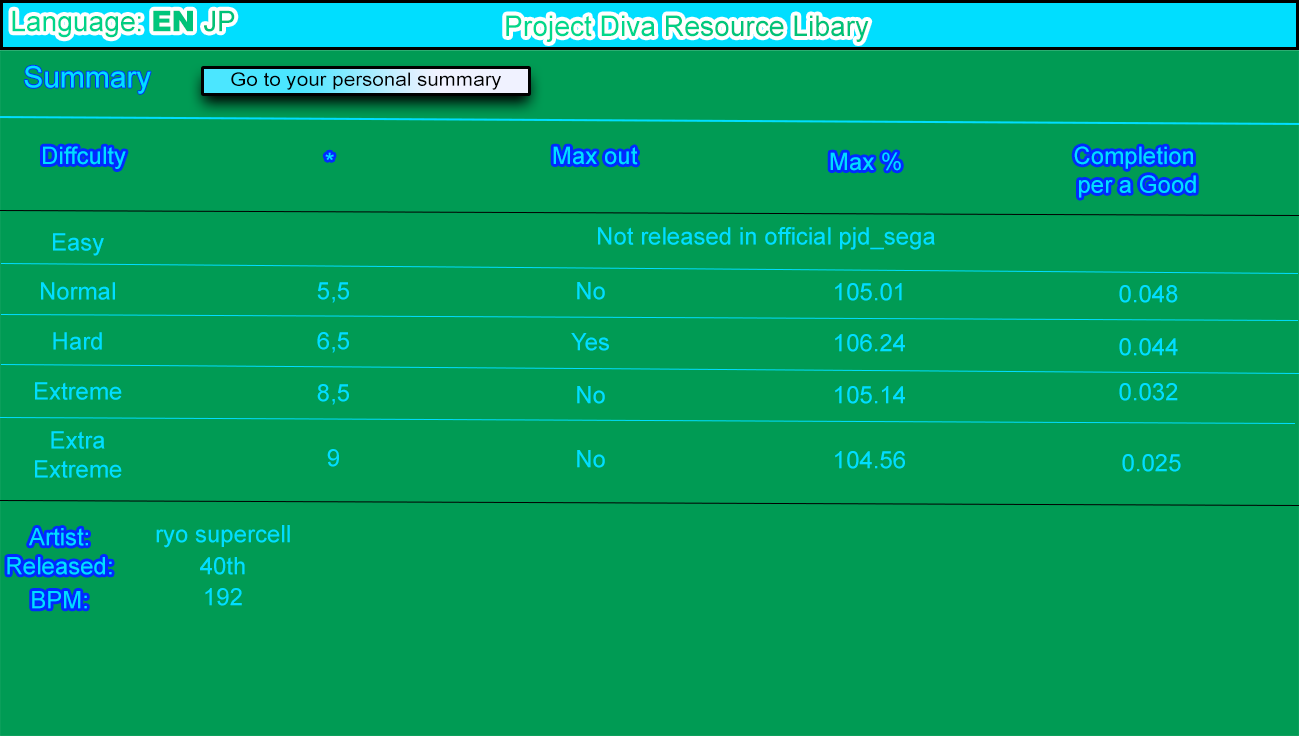
<style>
.page{position:relative;width:1299px;height:736px;background:#009b54}
.page>*{position:absolute;margin:0}
.t1{font:28.4px "ArialMT";color:#00c77d}
.t2{font:28.4px "Arial-Black";color:#00c77d}
.t3{font:28.4px "ArialMT";color:#00ce83}
.t4{font:30px "ArialMT";color:#00deff}
.t5{font:18.5px "ArialMT";color:#000000;scale:1.11 1}
.t6{font:24px "ArialMT";color:#00deff}
</style>
<div class="page">
<p class="t1" style="left:12px;top:10px;width:223px;height:28px">Language: <span class="t2">EN</span> JP</p>
<p class="t3" style="left:506px;top:15px;width:363px;height:27px">Project Diva Resource Libary</p>
<p class="t4" style="left:24px;top:65px;width:127px;height:29px">Summary</p>
<p class="t5" style="left:231px;top:72px;width:270px;height:18px">Go to your personal summary</p>
<p class="t6" style="left:43px;top:146px;width:83px;height:23px">Diffculty</p>
<p class="t6" style="left:553px;top:146px;width:85px;height:19px">Max out</p>
<p class="t6" style="left:1074px;top:146px;width:122px;height:52px;text-align:center">Completion<br> per a Good</p>
<p class="t6" style="left:325px;top:152px;width:9px;height:8px">*</p>
<p class="t6" style="left:830px;top:152px;width:71px;height:19px">Max %</p>
<p class="t6" style="left:53px;top:233px;width:51px;height:23px">Easy</p>
<p class="t6" style="left:598px;top:227px;width:337px;height:23px">Not released in official pjd_sega</p>
<p class="t6" style="left:41px;top:282px;width:74px;height:18px">Normal</p>
<p class="t6" style="left:317px;top:282px;width:32px;height:21px">5,5</p>
<p class="t6" style="left:577px;top:282px;width:28px;height:18px">No</p>
<p class="t6" style="left:835px;top:283px;width:67px;height:18px">105.01</p>
<p class="t6" style="left:1119px;top:285px;width:59px;height:18px">0.048</p>
<p class="t6" style="left:53px;top:332px;width:49px;height:18px">Hard</p>
<p class="t6" style="left:317px;top:332px;width:32px;height:21px">6,5</p>
<p class="t6" style="left:571px;top:333px;width:38px;height:18px">Yes</p>
<p class="t6" style="left:835px;top:334px;width:70px;height:18px">106.24</p>
<p class="t6" style="left:1119px;top:338px;width:59px;height:18px">0.044</p>
<p class="t6" style="left:35px;top:382px;width:87px;height:18px">Extreme</p>
<p class="t6" style="left:317px;top:384px;width:32px;height:21px">8,5</p>
<p class="t6" style="left:577px;top:386px;width:28px;height:18px">No</p>
<p class="t6" style="left:835px;top:386px;width:70px;height:18px">105.14</p>
<p class="t6" style="left:1119px;top:383px;width:59px;height:18px">0.032</p>
<p class="t6" style="left:35px;top:431px;width:87px;height:47px;text-align:center">Extra <br>Extreme</p>
<p class="t6" style="left:327px;top:449px;width:12px;height:18px">9</p>
<p class="t6" style="left:577px;top:450px;width:28px;height:18px">No</p>
<p class="t6" style="left:835px;top:451px;width:70px;height:18px">104.56</p>
<p class="t6" style="left:1122px;top:454px;width:59px;height:18px">0.025</p>
<p class="t6" style="left:29px;top:528px;width:59px;height:18px">Artist:</p>
<p class="t6" style="left:156px;top:525px;width:134px;height:23px">ryo supercell</p>
<p class="t6" style="left:7px;top:557px;width:105px;height:18px">Released:</p>
<p class="t6" style="left:200px;top:557px;width:45px;height:18px">40th</p>
<p class="t6" style="left:32px;top:591px;width:55px;height:18px">BPM:</p>
<p class="t6" style="left:205px;top:588px;width:37px;height:18px">192</p>
</div>
